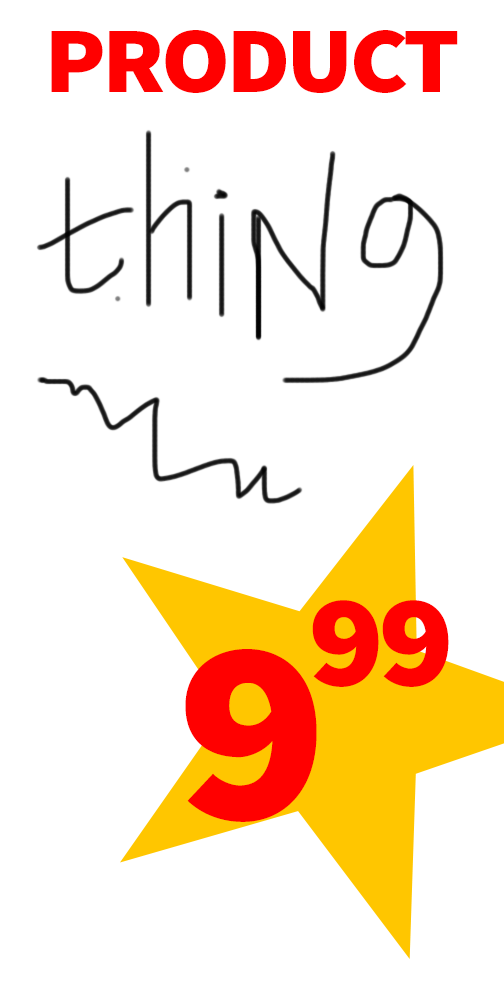
<style>
.page{position:relative;width:504px;height:1008px;background:#ffffff}
.page>*{position:absolute;margin:0}
.t1{font:94px "SourceSansPro-Black";letter-spacing:-0.04em;color:#ff0000;scale:1.06 1}
.t2{font:131.6px "SourceSansPro-Black";letter-spacing:-0.04em;color:#ff0000;scale:1.06 1}
.t3{font:263.2px "SourceSansPro-Black";letter-spacing:-0.04em;color:#ff0000;scale:1.06 1}
</style>
<div class="page">
<p class="t1" style="left:51px;top:30px;width:407px;height:63px">PRODUCT</p>
<p class="t2" style="left:312px;top:600px;width:137px;height:87px">99</p>
<p class="t3" style="left:185px;top:649px;width:132px;height:173px">9</p>
</div>
